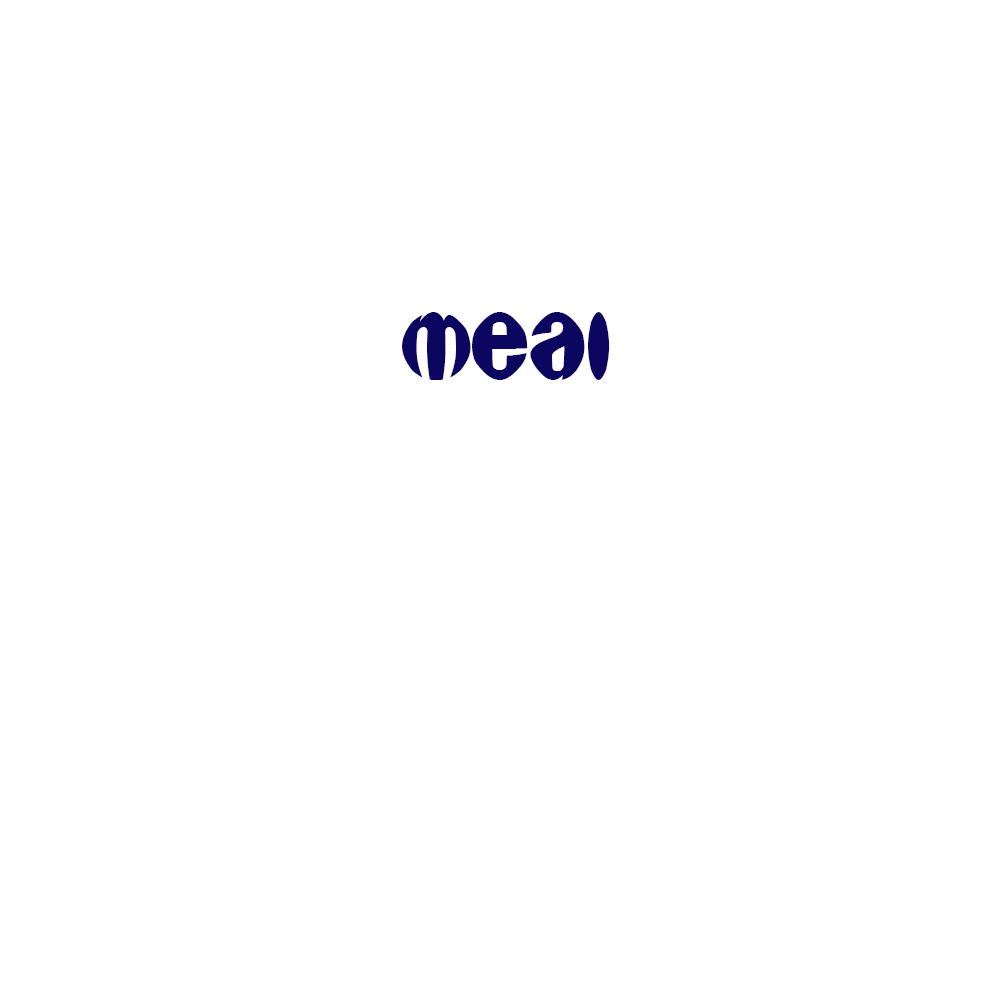
<style>
.page{position:relative;width:1000px;height:1000px;background:#ffffff}
.page>*{position:absolute;margin:0}
.t1{font:72px "Aragones";color:#0b0761}
</style>
<div class="page">
<p class="t1" style="left:402px;top:312px;width:208px;height:68px">meal</p>
</div>
